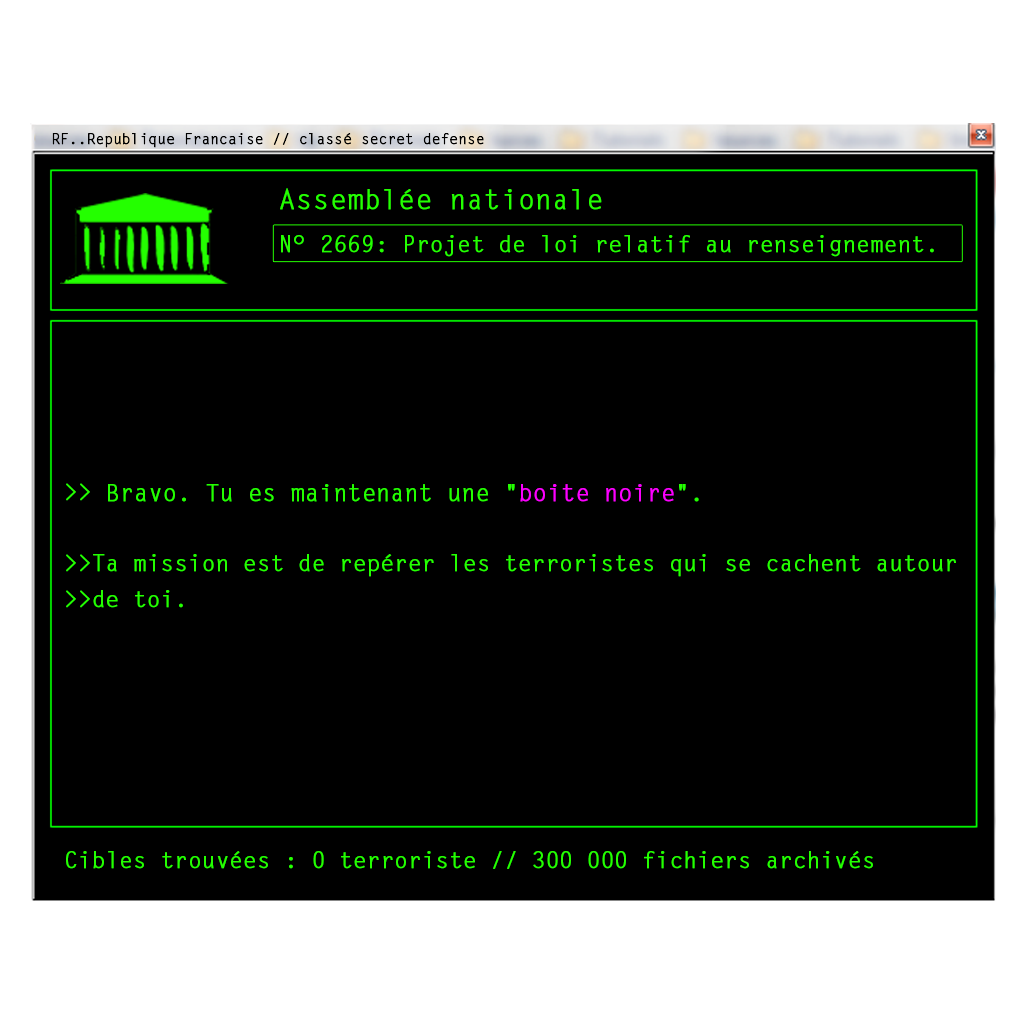
<style>
.page{position:relative;width:1024px;height:1024px;background:#000000}
.page>*{position:absolute;margin:0}
.t1{font:25px "LetterGothicStd";letter-spacing:-0.02em;color:#000000;font-weight:bold}
.t2{font:46.7px "LetterGothicStd";color:#24ff00;font-weight:bold}
.t3{font:38.6px "LetterGothicStd";letter-spacing:-0.02em;color:#24ff00;font-weight:bold}
.t4{font:38.6px/35.6px "LetterGothicStd";letter-spacing:-0.02em;color:#24ff00;font-weight:bold}
.t5{font:40px/35.6px "LetterGothicStd";letter-spacing:-0.02em;color:#24ff00;font-weight:bold}
.t6{font:40px/35.6px "LetterGothicStd";letter-spacing:-0.02em;color:#fc00ff;font-weight:bold}
</style>
<div class="page">
<p class="t1" style="left:52px;top:133px;width:432px;height:15px">RF..Republique Francaise // classé secret defense</p>
<p class="t2" style="left:280px;top:188px;width:322px;height:22px">Assemblée nationale</p>
<p class="t3" style="left:281px;top:235px;width:653px;height:22px">N° 2669: Projet de loi relatif au renseignement.</p>
<p class="t4" style="left:66px;top:483px;width:890px;height:125px">&gt;&gt; <span class="t5">Bravo. Tu es maintenant une "</span><span class="t6">boite noire</span><span class="t5">".<br></span> <br>&gt;&gt;Ta mission est de repérer les terroristes qui se cachent autour <br>&gt;&gt;de toi.</p>
<p class="t3" style="left:66px;top:851px;width:807px;height:18px">Cibles trouvées : 0 terroriste // 300 000 fichiers archivés</p>
</div>
